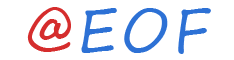
<style>
.page{position:relative;width:234px;height:60px;background:#ffffff}
.page>*{position:absolute;margin:0}
.t1{font:60px "SegoePrint";letter-spacing:0.05em;color:#2d71d5}
.t2{font:60px "SegoePrint";letter-spacing:0.05em;color:#d52d2d}
</style>
<div class="page">
<p class="t1" style="left:27px;top:7px;width:184px;height:47px"><span class="t2">@</span>EOF</p>
</div>
